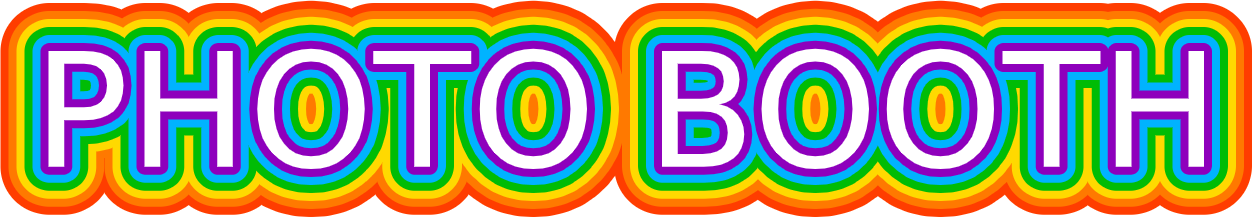
<style>
.page{position:relative;width:1252px;height:217px;background:#ffffff}
.page>*{position:absolute;margin:0}
.t1{font:159px "DejaVuSans";color:#ffffff}
</style>
<div class="page">
<p class="t1" style="left:48px;top:48px;width:1157px;height:122px">PHOTO BOOTH</p>
</div>
